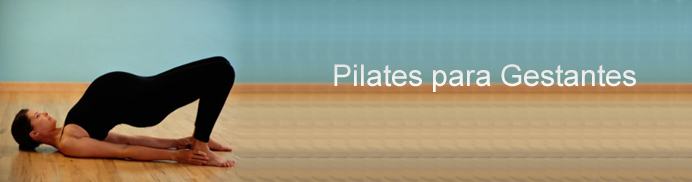
<style>
.page{position:relative;width:692px;height:182px}
.page>*{position:absolute;margin:0}
.t1{font:30px "ArialMT";color:#f1efef}
</style>
<div class="page">
<p class="t1" style="left:334px;top:64px;width:302px;height:28px">Pilates para Gestantes</p>
</div>
